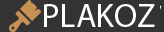
<style>
.page{position:relative;width:164px;height:32px;background:#333333}
.page>*{position:absolute;margin:0}
.t1{font:33.5px "MyriadPro-Regular";color:#fefefe}
</style>
<div class="page">
<p class="t1" style="left:44px;top:4px;width:111px;height:23px">PLAKOZ</p>
</div>
